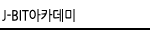
<style>
.page{position:relative;width:150px;height:30px;background:#ffffff}
.page>*{position:absolute;margin:0}
.t1{font:14px "NanumGothic";color:#000000;scale:0.9 1}
</style>
<div class="page">
<p class="t1" style="left:2px;top:9px;width:73px;height:13px">J-BIT아카데미</p>
</div>
